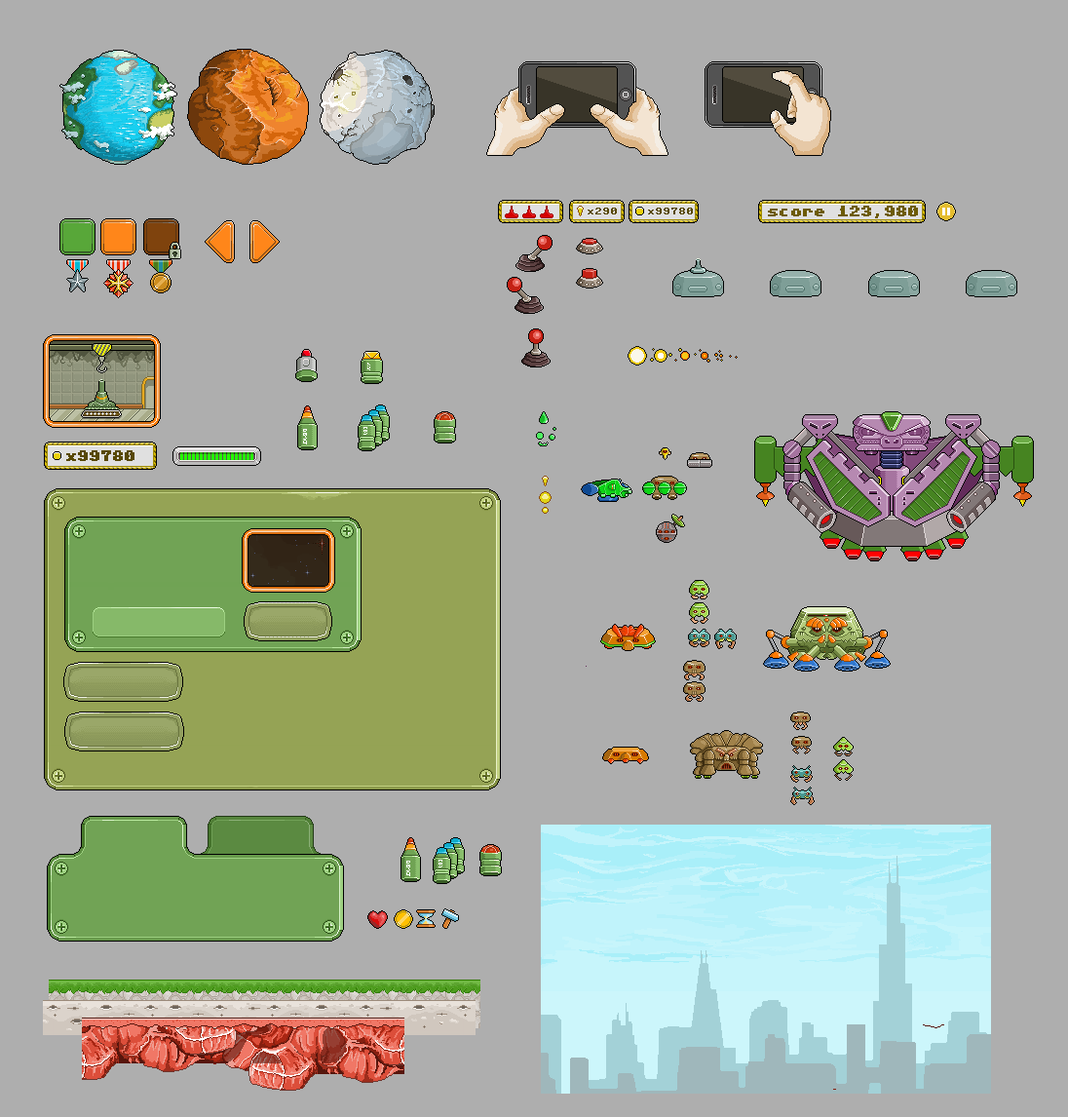
<style>
.page{position:relative;width:1068px;height:1117px;background:#aeaeae}
.page>*{position:absolute;margin:0}
.t1{font:7.8px "Adore64";color:#574803}
.t2{font:11.7px "Adore64";color:#6d5b06}
.t3{font:11.7px "Adore64";color:#574803}
</style>
<div class="page">
<p class="t1" style="left:588px;top:208px;width:29px;height:6px">x290</p>
<p class="t1" style="left:648px;top:208px;width:45px;height:6px">x99780</p>
<p class="t2" style="left:768px;top:206px;width:150px;height:12px">score 123,980</p>
<p class="t3" style="left:66px;top:450px;width:68px;height:11px">x99780</p>
</div>
